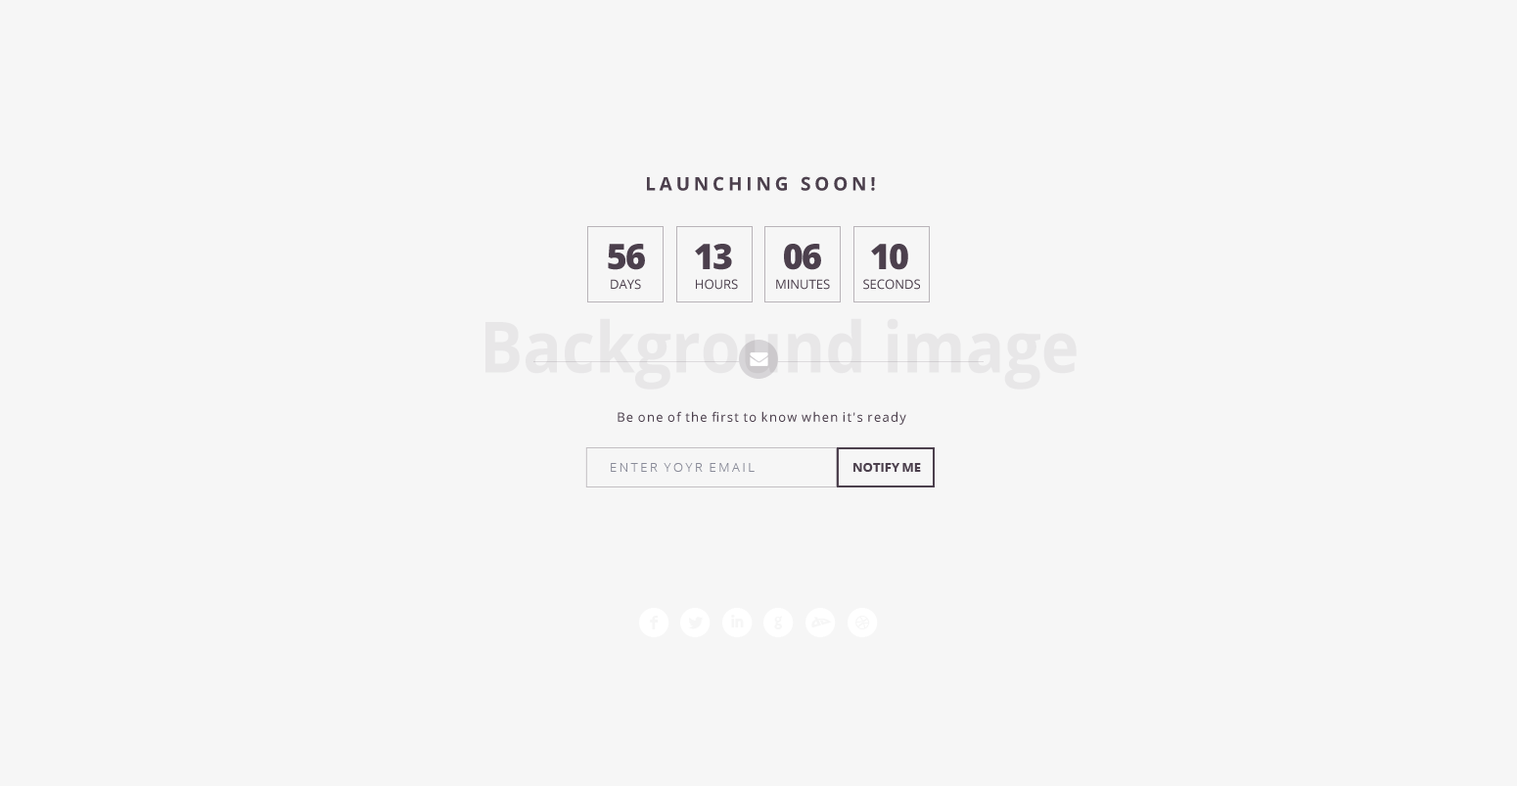
<style>
.page{position:relative;width:1517px;height:786px;background:#f6f6f6}
.page>*{position:absolute;margin:0}
.t1{font:18.6px "OpenSans-Bold";letter-spacing:0.2em;color:#4c404d;text-transform:uppercase}
.t2{font:35.2px "OpenSans-Extrabold";letter-spacing:-0.05em;color:#4c404d;text-transform:uppercase}
.t3{font:12.7px "OpenSans";color:#4c404d;text-transform:uppercase}
.t4{font:12.7px "OpenSans";letter-spacing:0.1em;color:#4c404d}
.t5{font:12.7px "OpenSans-Light";letter-spacing:0.2em;color:#898b98;text-transform:uppercase}
.t6{font:12.7px "OpenSans-Bold";color:#4c404d;text-transform:uppercase}
</style>
<div class="page">
<p class="t1" style="left:647px;top:176px;width:228px;height:15px">Launching soon!</p>
<p class="t2" style="left:608px;top:244px;width:37px;height:26px">56</p>
<p class="t2" style="left:695px;top:244px;width:37px;height:26px">13</p>
<p class="t2" style="left:784px;top:244px;width:37px;height:26px">06</p>
<p class="t2" style="left:871px;top:244px;width:37px;height:26px">10</p>
<p class="t3" style="left:611px;top:279px;width:30px;height:11px">Days</p>
<p class="t3" style="left:696px;top:279px;width:42px;height:11px">Hours</p>
<p class="t3" style="left:776px;top:279px;width:54px;height:11px">Minutes</p>
<p class="t3" style="left:863px;top:279px;width:57px;height:11px">seconds</p>
<p class="t4" style="left:618px;top:411px;width:288px;height:14px">Be one of the first to know when it's ready</p>
<p class="t5" style="left:611px;top:463px;width:144px;height:9px">Enter yoyr email</p>
<p class="t6" style="left:854px;top:463px;width:67px;height:9px">Notify me</p>
</div>
